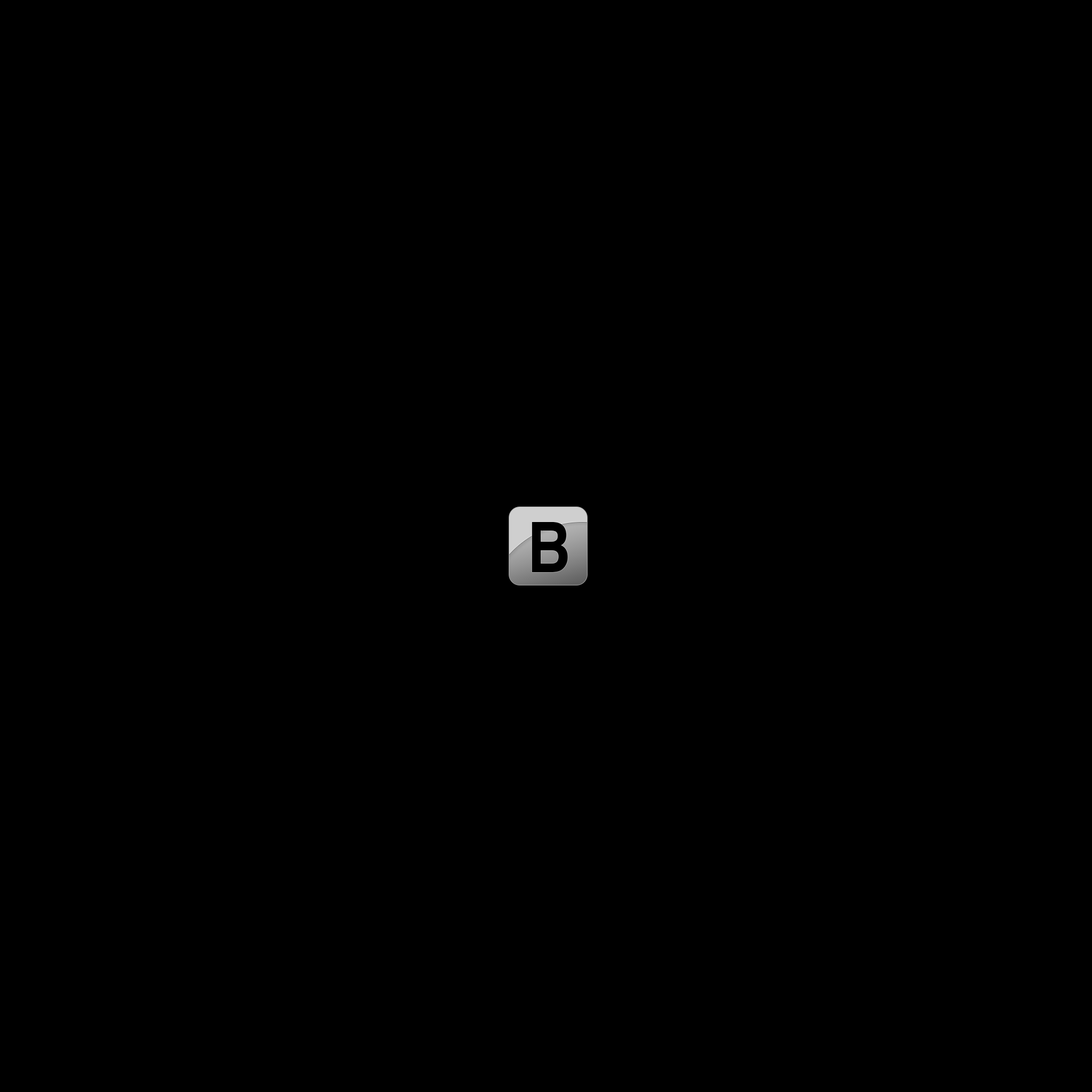
<style>
.page{position:relative;width:1092px;height:1092px;background:#000000}
.page>*{position:absolute;margin:0}
.t1{font:69.6px "Helvetica-Bold";color:#000000;scale:0.86 1}
</style>
<div class="page">
<p class="t1" style="left:532px;top:522px;width:36px;height:50px">B</p>
</div>
